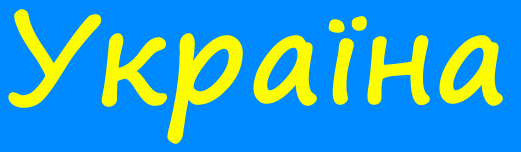
<style>
.page{position:relative;width:521px;height:152px;background:#0189ff}
.page>*{position:absolute;margin:0}
.t1{font:120px "SegoePrint";color:#fdfc02;font-weight:bold}
</style>
<div class="page">
<p class="t1" style="left:8px;top:9px;width:495px;height:135px">Україна</p>
</div>
